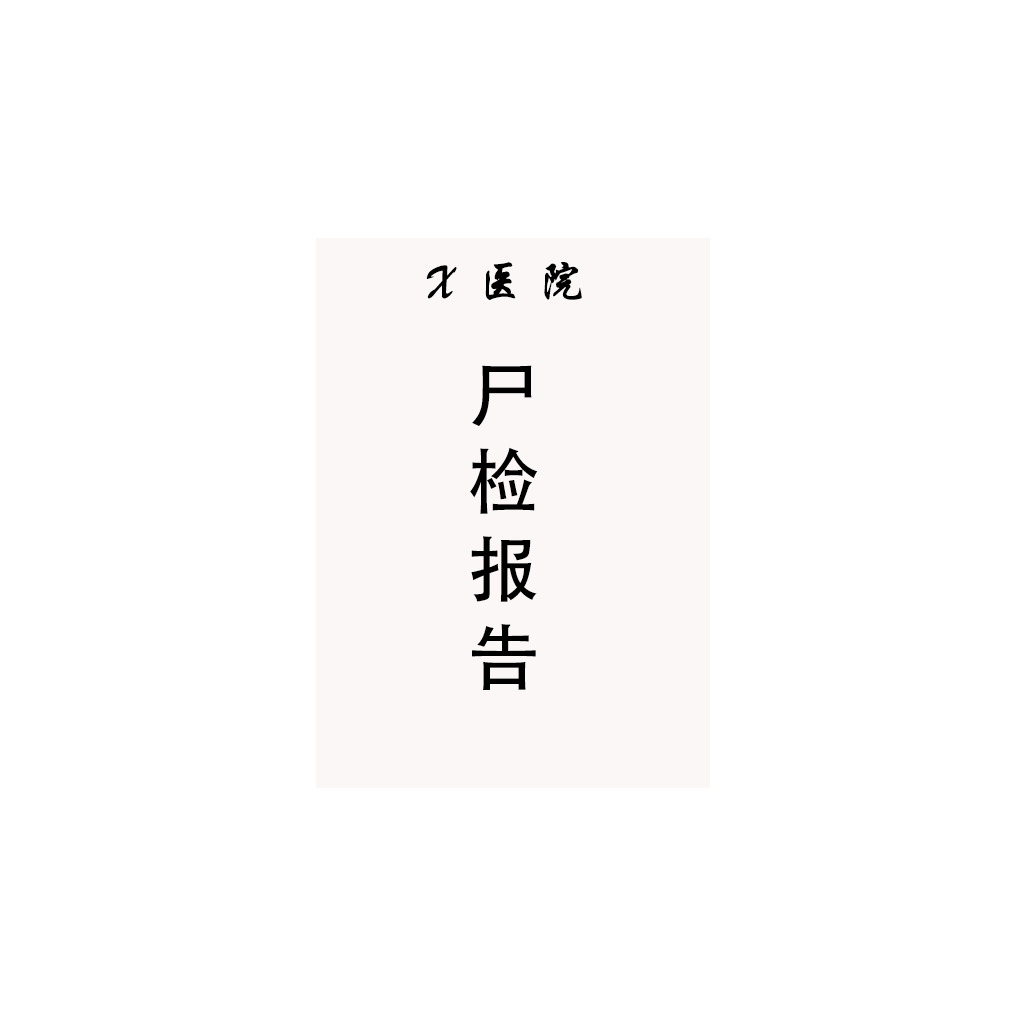
<style>
.page{position:relative;width:1024px;height:1024px;background:#ffffff}
.page>*{position:absolute;margin:0}
.t1{font:48px "STXingkai";color:#000000}
.t2{font:72px "AdobeHeitiStd-Regular";color:#000000}
</style>
<div class="page">
<p class="t1" style="left:426px;top:262px;width:156px;height:38px">X  医 院</p>
<p class="t2" style="left:470px;top:365px;width:68px;height:325px">尸 检 报 告</p>
</div>
